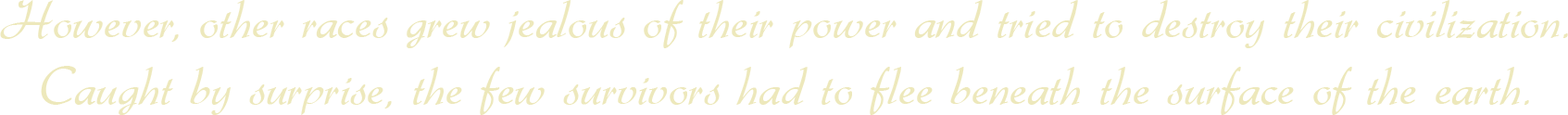
<style>
.page{position:relative;width:1568px;height:115px;background:#ffffff}
.page>*{position:absolute;margin:0}
.t1{font:55.6px "Gabrielle";color:#ede8bb}
</style>
<div class="page">
<p class="t1" style="left:0px;top:0px;width:1568px;height:115px;text-align:center">However, other races grew jealous of their power and tried to destroy their civilization.<br>Caught by surprise, the few survivors had to flee beneath the surface of the earth.</p>
</div>
